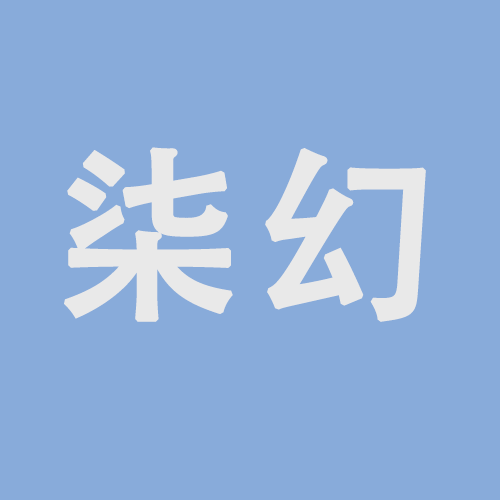
<style>
.page{position:relative;width:500px;height:500px;background:#88abda}
.page>*{position:absolute;margin:0}
.t1{font:187.9px "AdobeHeitiStd-Regular";letter-spacing:0.02em;color:#e9e9e9;font-weight:bold}
</style>
<div class="page">
<p class="t1" style="left:64px;top:147px;width:362px;height:175px">柒幻</p>
</div>
